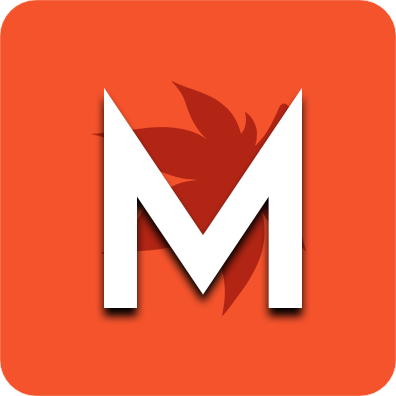
<style>
.page{position:relative;width:396px;height:396px;background:#f5532c}
.page>*{position:absolute;margin:0}
.t1{font:283.5px "ADAM.CGPRO";color:#ffffff}
</style>
<div class="page">
<p class="t1" style="left:104px;top:87px;width:198px;height:221px">M</p>
</div>
